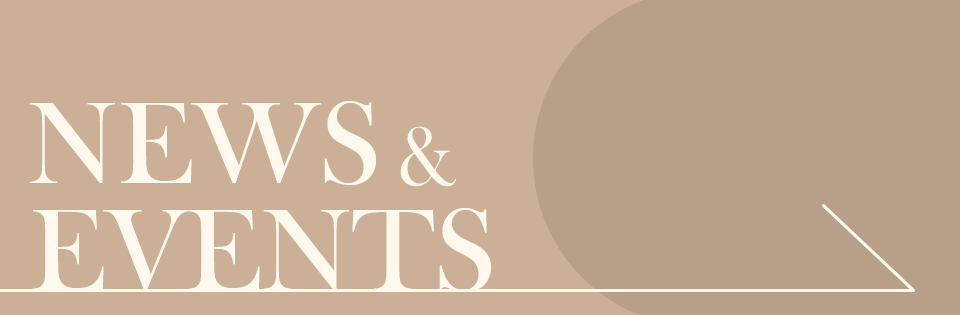
<style>
.page{position:relative;width:960px;height:315px;background:#cbb097}
.page>*{position:absolute;margin:0}
.t1{font:120px "BaskOldFace";color:#fff8ed}
.t2{font:85px "BaskOldFace";color:#fff8ed}
</style>
<div class="page">
<p class="t1" style="left:29px;top:101px;width:348px;height:84px">NEWS</p>
<p class="t2" style="left:400px;top:126px;width:57px;height:61px">&amp;</p>
<p class="t1" style="left:32px;top:208px;width:460px;height:84px">EVENTS</p>
</div>
